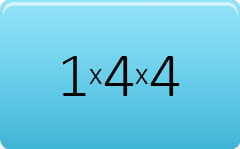
<style>
.page{position:relative;width:240px;height:149px}
.page>*{position:absolute;margin:0}
.t1{font:64px "Calibri-Light";color:#000000}
.t2{font:32px "Calibri-Light";color:#000000}
</style>
<div class="page">
<p class="t1" style="left:62px;top:56px;width:118px;height:40px">1<span class="t2">x</span>4<span class="t2">x</span>4</p>
</div>
